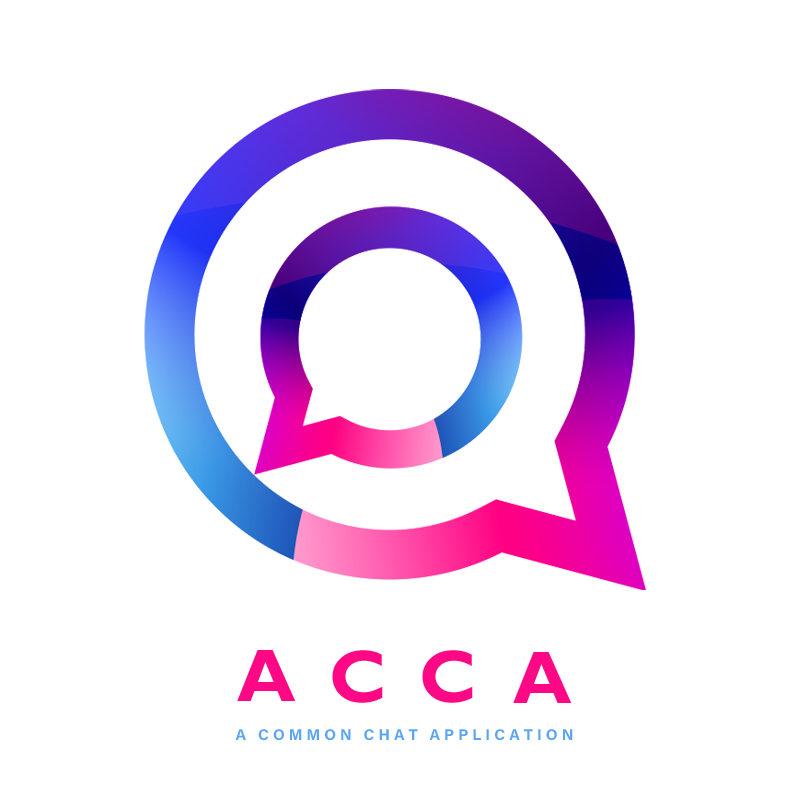
<style>
.page{position:relative;width:800px;height:800px;background:#ffffff}
.page>*{position:absolute;margin:0}
.t1{font:74.8px "GillSansMT-Bold";letter-spacing:0.01em;color:#ff0886}
.t2{font:15.4px "AcuminConcept-Bold";letter-spacing:0.01em;color:#5ba6ee}
</style>
<div class="page">
<p class="t1" style="left:237px;top:650px;width:59px;height:51px">A</p>
<p class="t1" style="left:332px;top:650px;width:51px;height:53px">C</p>
<p class="t1" style="left:422px;top:650px;width:51px;height:53px">C</p>
<p class="t1" style="left:513px;top:652px;width:59px;height:51px">A</p>
<p class="t2" style="left:235px;top:729px;width:338px;height:12px">A   C O M M O N   C H A T   A P P L I C A T I O N</p>
</div>
